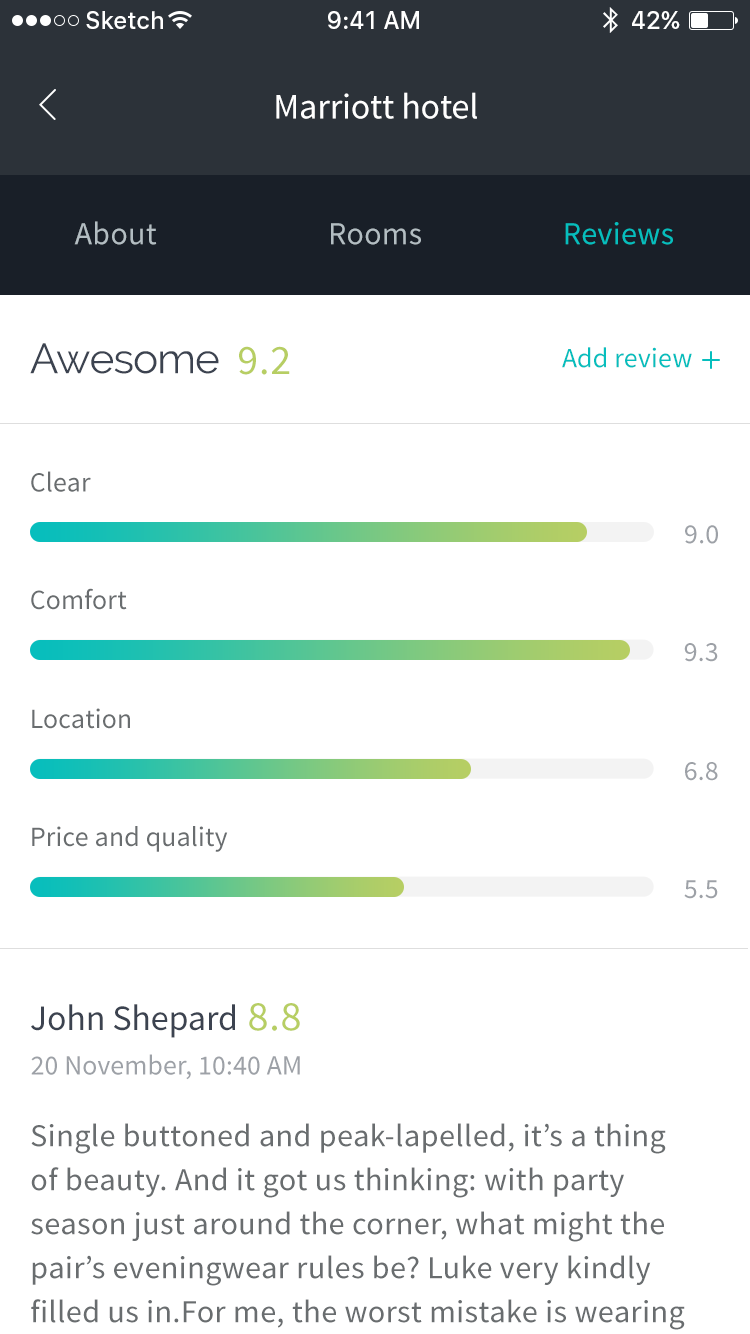
<style>
.page{position:relative;width:750px;height:1334px;background:#ffffff}
.page>*{position:absolute;margin:0}
.t1{font:24px "SFUIText-Medium";color:#ffffff}
.t2{font:36px "SourceSansPro-Regular";letter-spacing:-0.005em;color:#ffffff}
.t3{font:32px "SourceSansPro-Regular";letter-spacing:0.01em;color:#b3bdc2}
.t4{font:32px "SourceSansPro-Regular";letter-spacing:0.01em;color:#06bebd}
.t5{font:42px "Raleway";letter-spacing:-0.02em;color:#3c4350}
.t6{font:41.9px "SourceSansPro-Regular";letter-spacing:0.02em;color:#b7ce63}
.t7{font:28px "SourceSansPro-Regular";letter-spacing:0.005em;color:#06bebd}
.t8{font:28px "SourceSansPro-Regular";letter-spacing:0.005em;color:#696d6f}
.t9{font:28px "SourceSansPro-Regular";letter-spacing:0.005em;color:#9da1a7}
.t10{font:36px "SourceSansPro-Regular";letter-spacing:-0.005em;color:#3c4350}
.t11{font:32px/44px "SourceSansPro-Regular";letter-spacing:0.015em;color:#696d6f}
</style>
<div class="page">
<p class="t1" style="left:86px;top:11px;width:77px;height:18px">Sketch</p>
<p class="t1" style="left:328px;top:11px;width:91px;height:18px">9:41 AM</p>
<p class="t1" style="left:632px;top:11px;width:48px;height:18px">42%</p>
<p class="t2" style="left:276px;top:92px;width:201px;height:27px">Marriott hotel</p>
<p class="t3" style="left:74px;top:221px;width:83px;height:24px">About</p>
<p class="t4" style="left:565px;top:222px;width:108px;height:23px">Reviews</p>
<p class="t3" style="left:331px;top:223px;width:90px;height:22px">Rooms</p>
<p class="t5" style="left:30px;top:343px;width:189px;height:31px">Awesome</p>
<p class="t6" style="left:239px;top:346px;width:51px;height:29px">9.2</p>
<p class="t7" style="left:562px;top:347px;width:130px;height:21px">Add review</p>
<p class="t8" style="left:31px;top:471px;width:60px;height:21px">Clear</p>
<p class="t9" style="left:685px;top:525px;width:33px;height:19px">9.0</p>
<p class="t8" style="left:31px;top:588px;width:96px;height:22px">Comfort</p>
<p class="t9" style="left:684px;top:643px;width:34px;height:19px">9.3</p>
<p class="t8" style="left:32px;top:708px;width:98px;height:21px">Location</p>
<p class="t9" style="left:685px;top:762px;width:33px;height:19px">6.8</p>
<p class="t8" style="left:32px;top:826px;width:196px;height:26px">Price and quality</p>
<p class="t9" style="left:684px;top:880px;width:34px;height:19px">5.5</p>
<p class="t10" style="left:31px;top:1004px;width:204px;height:34px">John Shepard</p>
<p class="t6" style="left:249px;top:1003px;width:51px;height:28px">8.8</p>
<p class="t9" style="left:31px;top:1054px;width:269px;height:26px">20 November, 10:40 AM</p>
<p class="t11" style="left:31px;top:1123px;width:654px;height:207px">Single buttoned and peak-lapelled, it’s a thing of beauty. And it got us thinking: with party season just around the corner, what might the pair’s eveningwear rules be? Luke very kindly filled us in.For me, the worst mistake is wearing an actual black tie</p>
</div>
